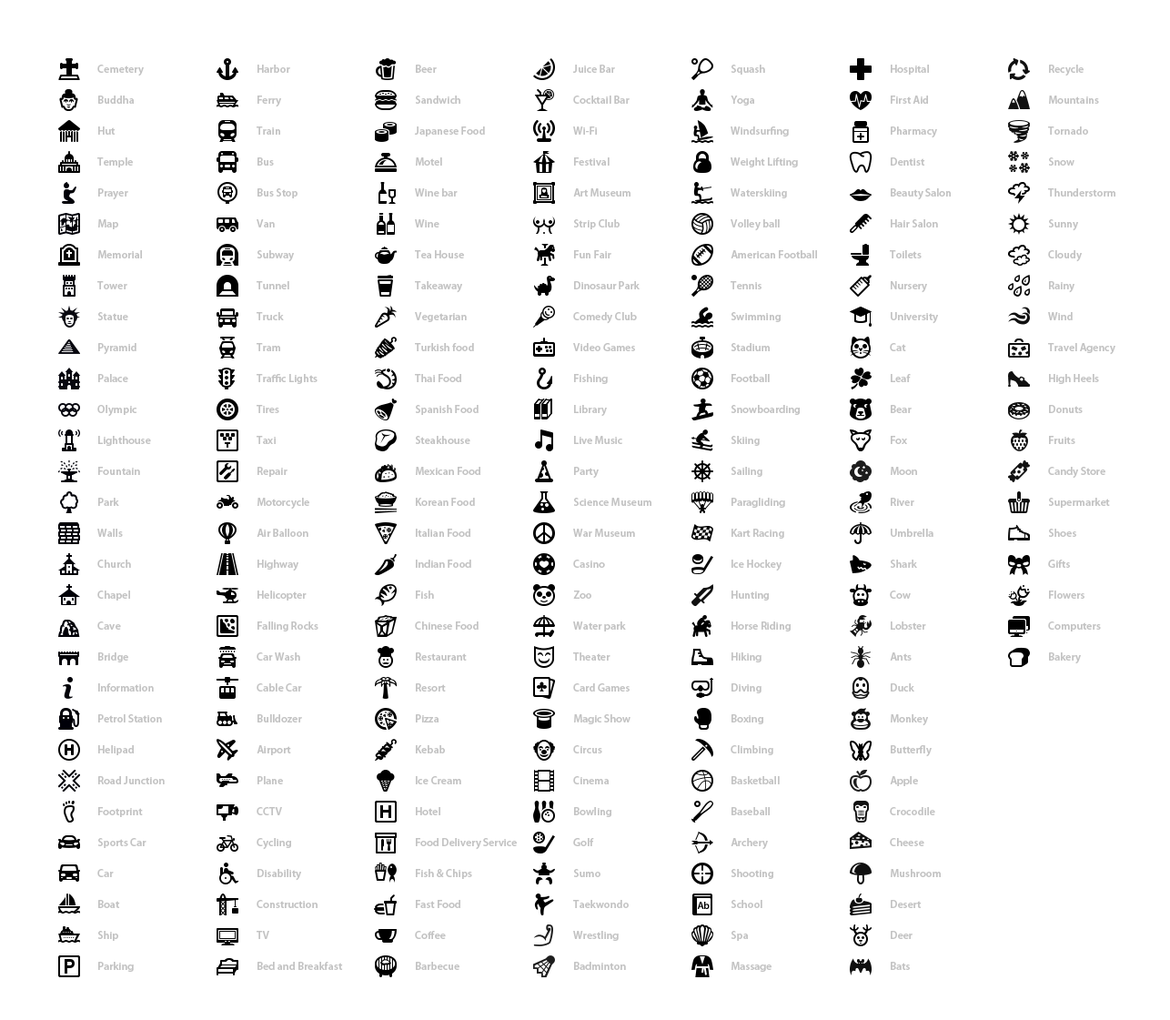
<style>
.page{position:relative;width:1170px;height:1020px;background:#ffffff}
.page>*{position:absolute;margin:0}
.t1{font:10.9px/30.9px "MyriadPro-Semibold";color:#c3c3c3}
</style>
<div class="page">
<p class="t1" style="left:97px;top:65px;width:68px;height:906px">Cemetery<br>Buddha<br>Hut<br>Temple<br>Prayer<br>Map<br>Memorial<br>Tower<br>Statue<br>Pyramid<br>Palace<br>Olympic<br>Lighthouse<br>Fountain<br>Park<br>Walls<br>Church<br>Chapel<br>Cave<br>Bridge<br>Information<br>Petrol Station<br>Helipad<br>Road Junction<br>Footprint<br>Sports Car<br>Car<br>Boat<br>Ship<br>Parking</p>
<p class="t1" style="left:256px;top:65px;width:87px;height:905px">Harbor<br>Ferry<br>Train<br>Bus<br>Bus Stop<br>Van<br>Subway<br>Tunnel<br>Truck<br>Tram<br>Traffic Lights<br>Tires<br>Taxi<br>Repair<br>Motorcycle<br>Air Balloon<br>Highway<br>Helicopter<br>Falling Rocks<br>Car Wash<br>Cable Car<br>Bulldozer<br>Airport<br>Plane<br>CCTV<br>Cycling<br>Disability<br>Construction<br>TV<br>Bed and Breakfast</p>
<p class="t1" style="left:414px;top:65px;width:103px;height:905px">Beer<br>Sandwich<br>Japanese Food<br>Motel<br>Wine bar<br>Wine<br>Tea House<br>Takeaway<br>Vegetarian<br>Turkish food<br>Thai Food<br>Spanish Food<br>Steakhouse<br>Mexican Food<br>Korean Food<br>Italian Food<br>Indian Food<br>Fish<br>Chinese Food<br>Restaurant<br>Resort<br>Pizza<br>Kebab<br>Ice Cream<br>Hotel<br>Food Delivery Service<br>Fish &amp; Chips<br>Fast Food<br>Coffee<br>Barbecue</p>
<p class="t1" style="left:572px;top:65px;width:79px;height:905px">Juice Bar<br>Cocktail Bar<br>Wi-Fi<br>Festival<br>Art Museum<br>Strip Club<br>Fun Fair<br>Dinosaur Park<br>Comedy Club<br>Video Games<br>Fishing<br>Library<br>Live Music<br>Party<br>Science Museum<br>War Museum<br>Casino<br>Zoo<br>Water park<br>Theater<br>Card Games<br>Magic Show<br>Circus<br>Cinema<br>Bowling<br>Golf<br>Sumo<br>Taekwondo<br>Wrestling<br>Badminton</p>
<p class="t1" style="left:730px;top:65px;width:87px;height:906px">Squash<br>Yoga<br>Windsurfing<br>Weight Lifting<br>Waterskiing<br>Volley ball<br>American Football<br>Tennis<br>Swimming<br>Stadium<br>Football<br>Snowboarding<br>Skiing<br>Sailing<br>Paragliding<br>Kart Racing<br>Ice Hockey<br>Hunting<br>Horse Riding<br>Hiking<br>Diving<br>Boxing<br>Climbing<br>Basketball<br>Baseball<br>Archery<br>Shooting<br>School<br>Spa<br>Massage</p>
<p class="t1" style="left:889px;top:65px;width:61px;height:905px">Hospital<br>First Aid<br>Pharmacy<br>Dentist<br>Beauty Salon<br>Hair Salon<br>Toilets<br>Nursery<br>University<br>Cat<br>Leaf<br>Bear<br>Fox<br>Moon<br>River<br>Umbrella<br>Shark<br>Cow<br>Lobster<br>Ants<br>Duck<br>Monkey<br>Butterfly<br>Apple<br>Crocodile<br>Cheese<br>Mushroom<br>Desert<br>Deer<br>Bats</p>
<p class="t1" style="left:1048px;top:65px;width:67px;height:599px">Recycle<br>Mountains<br>Tornado<br>Snow<br>Thunderstorm<br>Sunny<br>Cloudy<br>Rainy<br>Wind<br>Travel Agency<br>High Heels<br>Donuts<br>Fruits<br>Candy Store<br>Supermarket<br>Shoes<br>Gifts<br>Flowers<br>Computers<br>Bakery</p>
</div>
